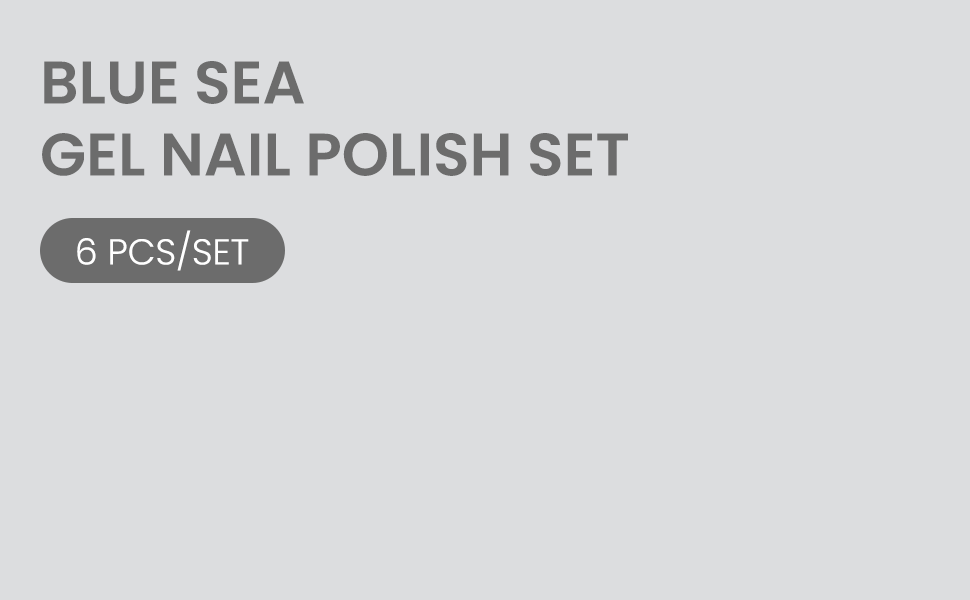
<style>
.page{position:relative;width:970px;height:600px;background:#dcdddf}
.page>*{position:absolute;margin:0}
.t1{font:60px "Poppins-SemiBold";color:#6c6c6c;text-transform:uppercase}
.t2{font:36px "Poppins-Light";color:#ffffff}
</style>
<div class="page">
<p class="t1" style="left:42px;top:61px;width:586px;height:115px">Blue Sea<br>Gel Nail Polish Set</p>
<p class="t2" style="left:77px;top:230px;width:172px;height:41px">6 PCS/SET</p>
</div>
